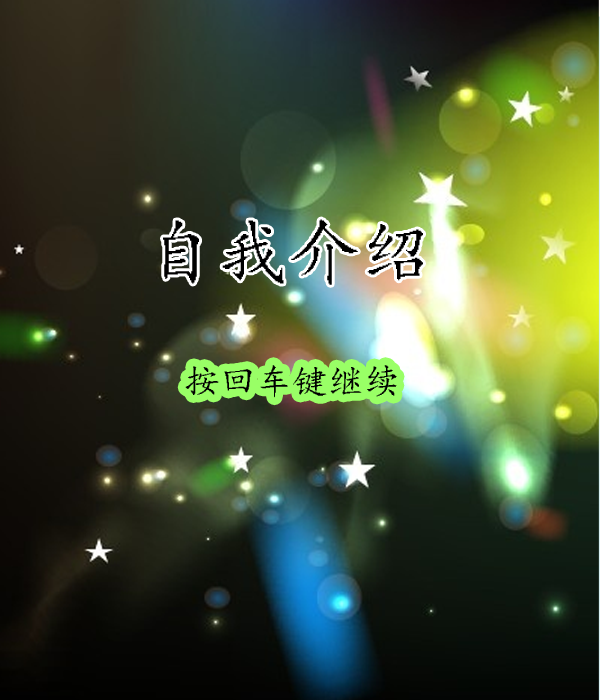
<style>
.page{position:relative;width:600px;height:700px}
.page>*{position:absolute;margin:0}
.t1{font:72px "¿¬Ìå-Regular";color:#000000}
.t2{font:36px "¿¬Ìå-Regular";color:#000000}
</style>
<div class="page">
<p class="t1" style="left:163px;top:219px;width:260px;height:66px">自我介绍</p>
<p class="t2" style="left:185px;top:365px;width:212px;height:33px">按回车键继续</p>
</div>
